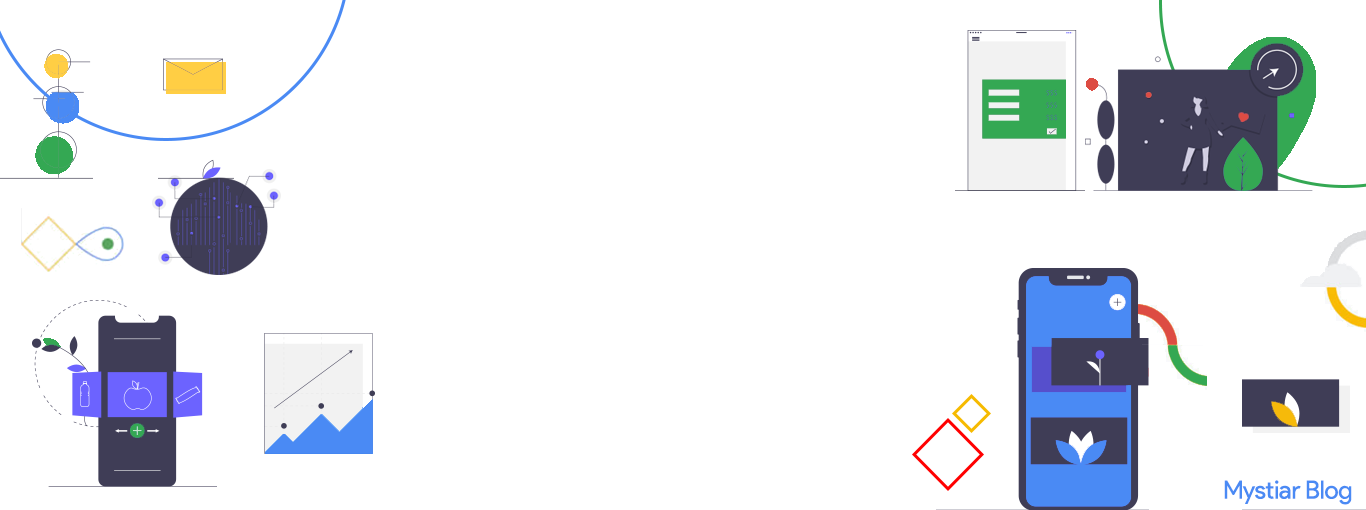
<style>
.page{position:relative;width:1366px;height:510px;background:#ffffff}
.page>*{position:absolute;margin:0}
.t1{font:25px "ProductSans-Regular";letter-spacing:-0.01em;color:#4a8af4}
</style>
<div class="page">
<p class="t1" style="left:1224px;top:480px;width:128px;height:25px">Mystiar Blog</p>
</div>
